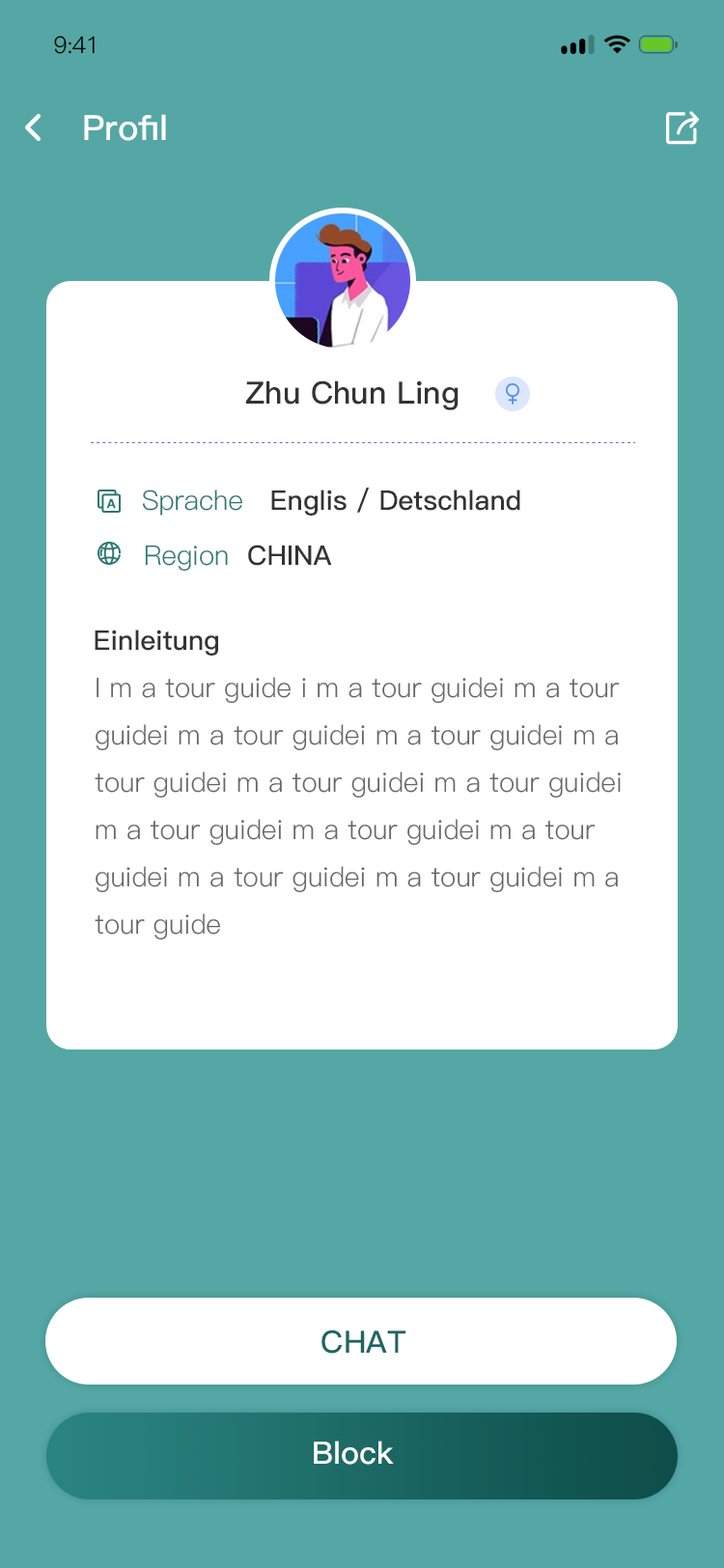
<style>
.page{position:relative;width:724px;height:1568px;background:#ffffff}
.page>*{position:absolute;margin:0}
.t1{font:23.2px "PingFang-SC-Regular";letter-spacing:-0.025em;color:#000000}
.t2{font:34.8px "PingFang-SC-Bold";color:#ffffff}
.t3{font:30.9px "PingFang-SC-Bold";color:#333333}
.t4{font:30.9px "PingFang-SC-Bold";color:#333333;text-transform:uppercase}
.t5{font:27px "PingFang-SC-Bold";color:#333333}
.t6{font:27px "PingFang-SC-Regular";color:#2c7873;text-transform:uppercase}
.t7{font:27px "PingFang-SC-Regular";color:#2c7873}
.t8{font:27px "PingFang-SC-Bold";color:#333333;text-transform:uppercase}
.t9{font:27px "PingFang-SC-Regular";color:#666666}
.t10{font:27px "PingFang-SC-Regular";color:#666666;text-transform:uppercase}
.t11{font:30.9px "PingFang-SC-Bold";color:#1f6662;text-transform:uppercase}
.t12{font:30.9px "PingFang-SC-Bold";color:#ffffff}
</style>
<div class="page">
<p class="t1" style="left:54px;top:36px;width:41px;height:18px">9:41</p>
<p class="t2" style="left:84px;top:114px;width:82px;height:27px">Profil</p>
<p class="t3" style="left:245px;top:380px;width:214px;height:30px"><span class="t4">z</span>hu <span class="t4">c</span>hun <span class="t4">l</span>ing</p>
<p class="t5" style="left:142px;top:488px;width:378px;height:28px"><span class="t6">S</span><span class="t7">prache</span>   Englis / Detschland</p>
<p class="t7" style="left:145px;top:545px;width:187px;height:27px">Region  <span class="t8">china</span></p>
<p class="t5" style="left:95px;top:630px;width:123px;height:26px">Einleitung</p>
<p class="t9" style="left:95px;top:677px;width:526px;height:263px"><span class="t10">i</span> m a tour guide i m a tour guidei m a tour guidei m a tour guidei m a tour guidei m a tour guidei m a tour guidei m a tour guidei m a tour guidei m a tour guidei m a tour guidei m a tour guidei m a tour guidei m a tour guide</p>
<p class="t11" style="left:322px;top:1330px;width:84px;height:24px">Chat</p>
<p class="t12" style="left:314px;top:1441px;width:80px;height:24px">Block</p>
</div>
